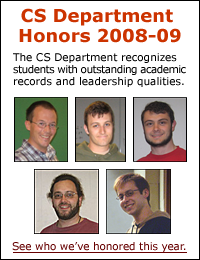
<style>
.page{position:relative;width:200px;height:260px;background:#ffffff}
.page>*{position:absolute;margin:0}
.t1{font:18px/20px "Verdana-Bold";color:#cc3300}
.t2{font:10.5px/12px "Verdana";letter-spacing:-0.05em;color:#000000}
.t3{font:10.5px/12px "Verdana";color:#000000}
.t4{font:10.5px "Verdana";letter-spacing:-0.01em;color:#660000}
</style>
<div class="page">
<p class="t1" style="left:19px;top:8px;width:162px;height:35px;text-align:center">CS Department <br>Honors 2008-09</p>
<p class="t2" style="left:13px;top:53px;width:173px;height:34px"><span class="t3">The CS Department recognizes <br></span>students with outstanding academic <br><span class="t3">records and leadership qualities.</span></p>
<p class="t4" style="left:12px;top:242px;width:174px;height:10px">See who we’ve honored this year.</p>
</div>
